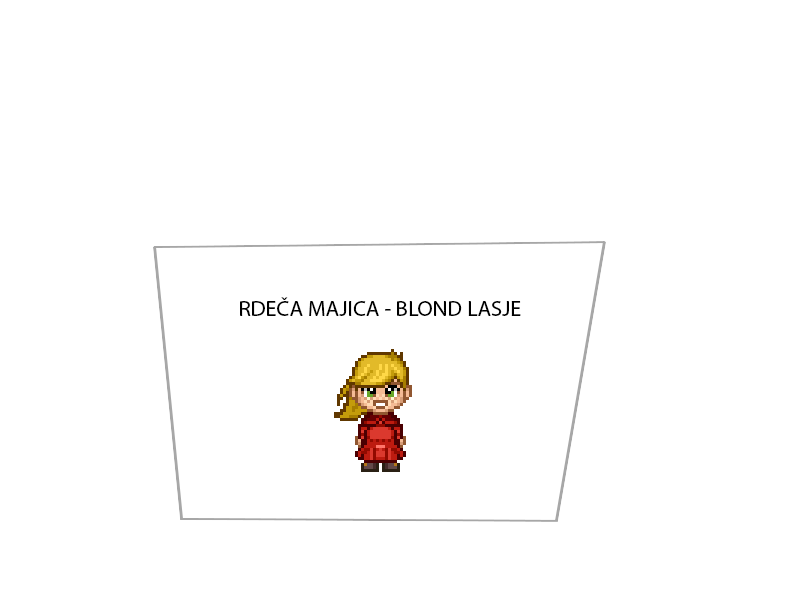
<style>
.page{position:relative;width:800px;height:600px;background:#ffffff}
.page>*{position:absolute;margin:0}
.t1{font:16.7px "MyriadPro-Regular";color:#000000}
</style>
<div class="page">
<p class="t1" style="left:240px;top:297px;width:281px;height:19px">RDEČA MAJICA - BLOND LASJE</p>
</div>
